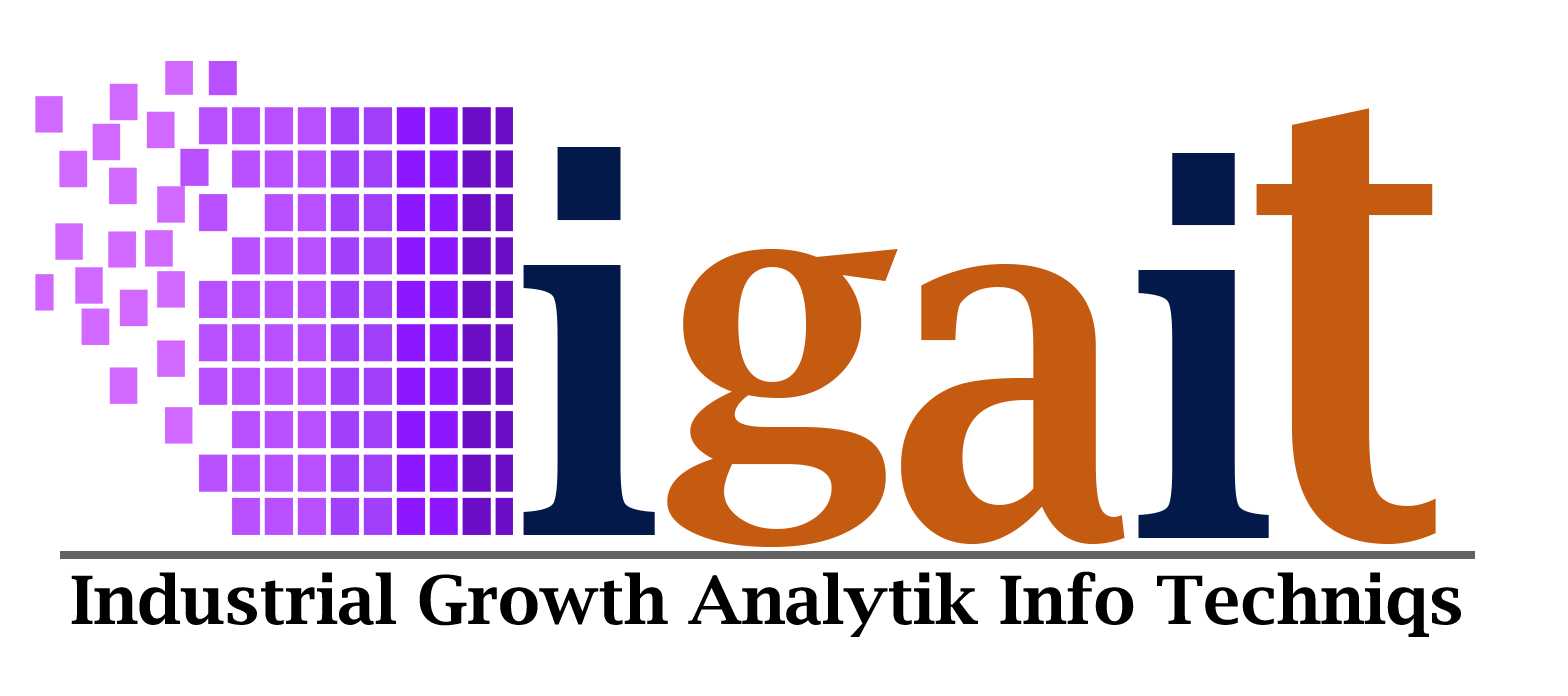
<style>
.page{position:relative;width:1568px;height:696px;background:#ffffff}
.page>*{position:absolute;margin:0}
.t1{font:656.3px "LucidaBright-Demi";color:#c55a11;scale:0.81 1}
.t2{font:502.5px "LucidaBright-Demi";color:#021949;scale:0.87 1}
.t3{font:498.8px "LucidaBright-Demi";color:#c55a11;scale:0.87 1}
.t4{font:498.8px "LucidaBright-Demi";color:#021949;scale:0.87 1}
.t5{font:394.7px "LucidaBright-Demi";color:#c55a11}
.t6{font:66.7px "LucidaBright-Demi";color:#000000}
</style>
<div class="page">
<p class="t1" style="left:1256px;top:108px;width:180px;height:436px">t</p>
<p class="t2" style="left:523px;top:147px;width:132px;height:388px">i</p>
<p class="t3" style="left:901px;top:153px;width:368px;height:391px">a<span class="t4">i</span></p>
<p class="t5" style="left:667px;top:249px;width:231px;height:298px">g</p>
<p class="t6" style="left:71px;top:571px;width:1390px;height:66px">Industrial Growth Analytik Info Techniqs</p>
</div>
